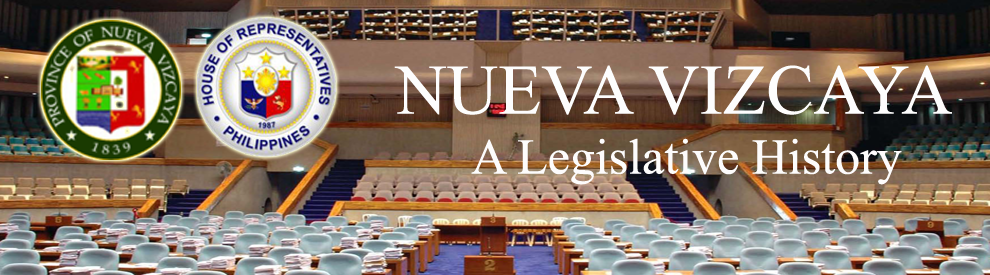
<style>
.page{position:relative;width:990px;height:275px}
.page>*{position:absolute;margin:0}
.t1{font:50px "TimesNewRomanPSMT";color:#fdfcfc}
.t2{font:70.8px "TimesNewRomanPSMT";color:#fdfdfd}
</style>
<div class="page">
<p class="t1" style="left:394px;top:65px;width:558px;height:120px;text-align:center"><span class="t2">NUEVA VIZCAYA<br></span>A Legislative History</p>
</div>
